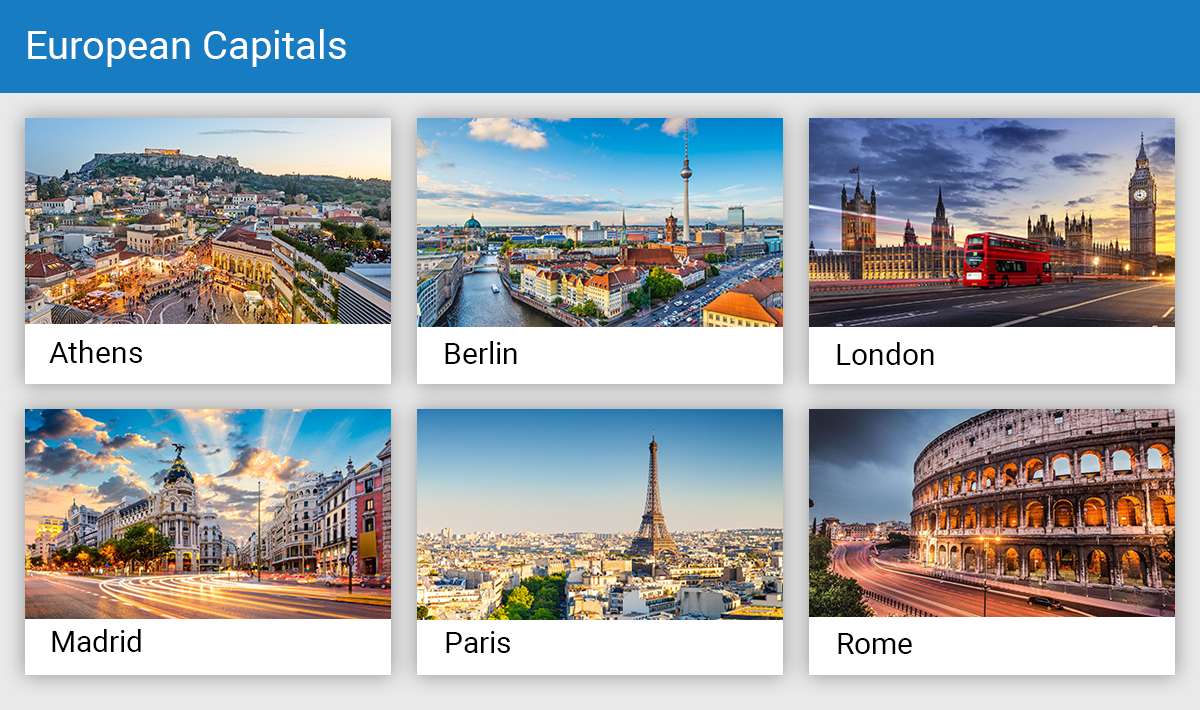
<style>
.page{position:relative;width:1200px;height:710px}
.page>*{position:absolute;margin:0}
.t1{font:40px "Roboto-Regular";color:#ffffff}
.t2{font:30px "Roboto-Regular";color:#000000}
</style>
<div class="page">
<p class="t1" style="left:28px;top:29px;width:318px;height:38px">European Capitals</p>
<p class="t2" style="left:49px;top:340px;width:93px;height:23px">Athens</p>
<p class="t2" style="left:445px;top:341px;width:72px;height:23px">Berlin</p>
<p class="t2" style="left:837px;top:342px;width:97px;height:23px">London</p>
<p class="t2" style="left:52px;top:629px;width:89px;height:23px">Madrid</p>
<p class="t2" style="left:446px;top:631px;width:64px;height:22px">Paris</p>
<p class="t2" style="left:838px;top:633px;width:74px;height:21px">Rome</p>
</div>
